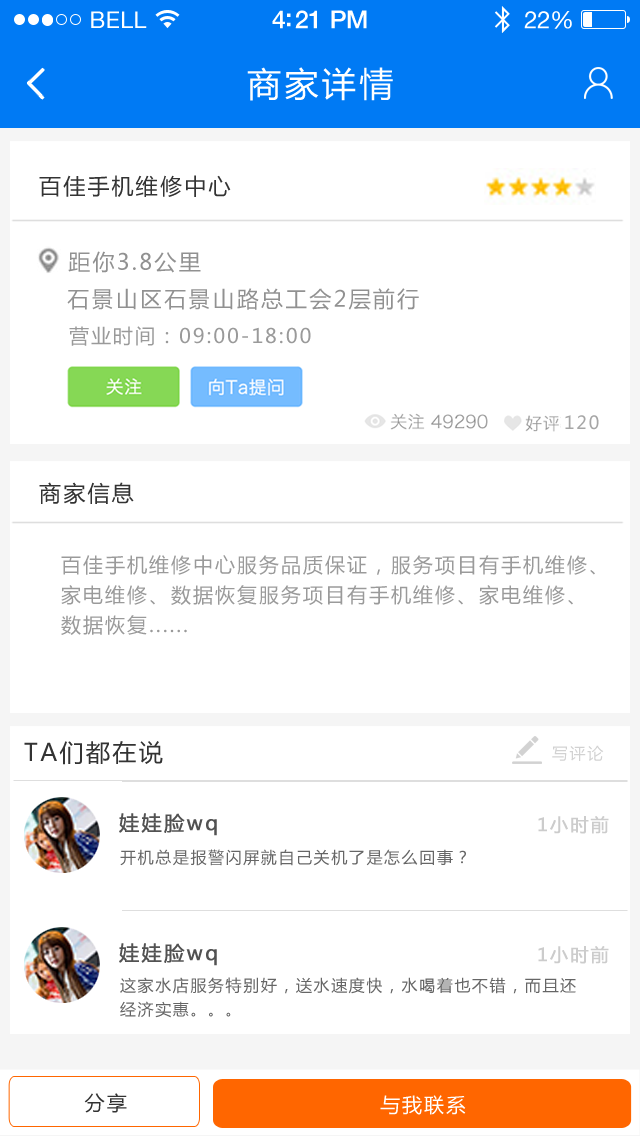
<style>
.page{position:relative;width:640px;height:1136px;background:#ffffff}
.page>*{position:absolute;margin:0}
.t1{font:23px "HelveticaNeue";letter-spacing:0.02em;color:#ffffff}
.t2{font:25px "HelveticaNeue-Medium";letter-spacing:-0.02em;color:#ffffff}
.t3{font:24px "HelveticaNeue";letter-spacing:-0.02em;color:#ffffff}
.t4{font:34px "MicrosoftYaHei";letter-spacing:0.1em;color:#ffffff}
.t5{font:22px "MicrosoftYaHei";letter-spacing:0.1em;color:#333333}
.t6{font:22px "MicrosoftYaHei";letter-spacing:0.1em;color:#919191}
.t7{font:20px "MicrosoftYaHei";letter-spacing:0.1em;color:#9a9a9a}
.t8{font:18px "MicrosoftYaHei";letter-spacing:0.1em;color:#a6a6a6}
.t9{font:20px/30px "MicrosoftYaHei";letter-spacing:0.1em;color:#9a9a9a}
.t10{font:24px "MicrosoftYaHei";letter-spacing:0.1em;color:#333333}
.t11{font:20px "MicrosoftYaHei";letter-spacing:0.1em;color:#525252;font-weight:bold}
.t12{font:18px "MicrosoftYaHei";letter-spacing:0.1em;color:#cccccc;font-weight:bold}
.t13{font:16px "MicrosoftYaHei";letter-spacing:0.1em;color:#666666}
.t14{font:16px/24px "MicrosoftYaHei";letter-spacing:0.1em;color:#666666}
.t15{font:20px "MicrosoftYaHei";letter-spacing:0.1em;color:#333333}
.t16{font:20px "MicrosoftYaHei";letter-spacing:0.1em;color:#ffffff}
</style>
<div class="page">
<p class="t1" style="left:91px;top:11px;width:56px;height:17px">BELL</p>
<p class="t2" style="left:272px;top:10px;width:95px;height:19px">4:21 PM</p>
<p class="t3" style="left:524px;top:11px;width:48px;height:18px">22%</p>
<p class="t4" style="left:247px;top:67px;width:146px;height:34px">商家详情</p>
<p class="t5" style="left:39px;top:175px;width:192px;height:22px">百佳手机维修中心</p>
<p class="t6" style="left:68px;top:251px;width:133px;height:22px">距你3.8公里</p>
<p class="t6" style="left:67px;top:288px;width:352px;height:22px">石景山区石景山路总工会2层前行</p>
<p class="t7" style="left:69px;top:326px;width:242px;height:20px">营业时间：09:00-18:00</p>
<p class="t8" style="left:565px;top:415px;width:34px;height:15px">120</p>
<p class="t5" style="left:39px;top:482px;width:95px;height:22px">商家信息</p>
<p class="t9" style="left:61px;top:555px;width:534px;height:80px">百佳手机维修中心服务品质保证，服务项目有手机维修、<br>家电维修、数据恢复服务项目有手机维修、家电维修、<br>数据恢复......</p>
<p class="t10" style="left:24px;top:741px;width:139px;height:24px">TA们都在说</p>
<p class="t11" style="left:119px;top:813px;width:98px;height:23px">娃娃脸wq</p>
<p class="t12" style="left:538px;top:816px;width:71px;height:18px">1小时前</p>
<p class="t13" style="left:120px;top:849px;width:346px;height:17px">开机总是报警闪屏就自己关机了是怎么回事？</p>
<p class="t11" style="left:119px;top:943px;width:98px;height:23px">娃娃脸wq</p>
<p class="t12" style="left:538px;top:946px;width:71px;height:18px">1小时前</p>
<p class="t14" style="left:120px;top:977px;width:456px;height:41px">这家水店服务特别好，送水速度快，水喝着也不错，而且还<br>经济实惠。。。</p>
<p class="t15" style="left:84px;top:1093px;width:43px;height:20px">分享</p>
<p class="t16" style="left:380px;top:1095px;width:86px;height:20px">与我联系</p>
</div>
